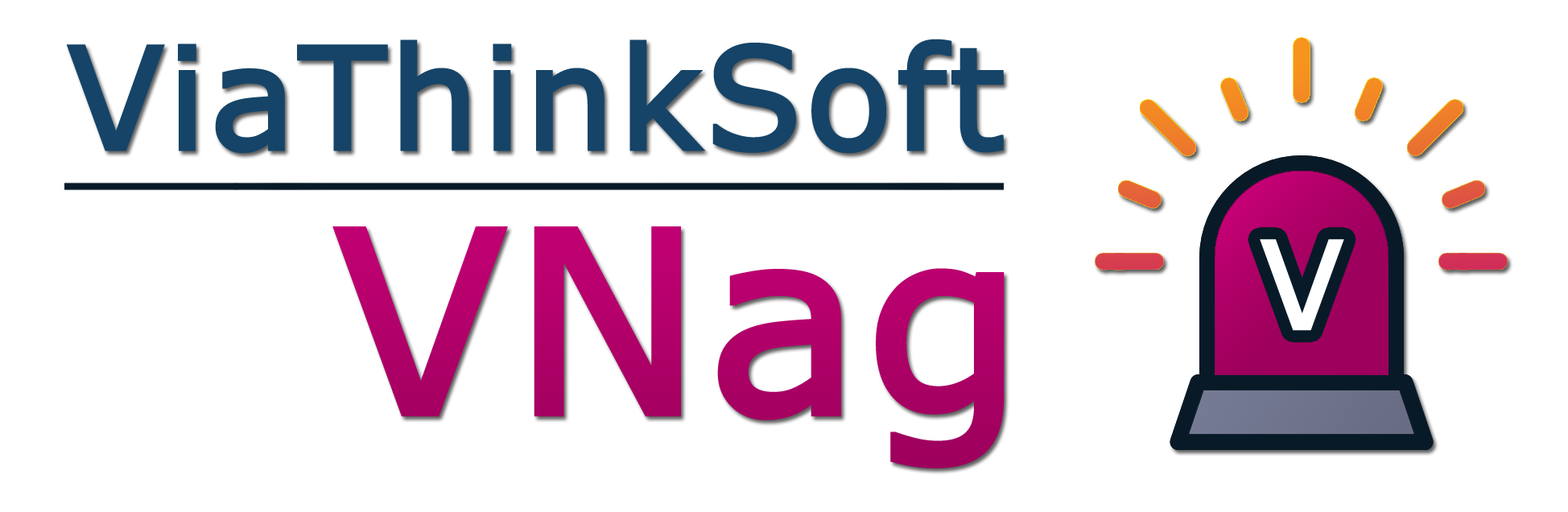
<style>
.page{position:relative;width:1568px;height:512px;background:#ffffff}
.page>*{position:absolute;margin:0}
.t1{font:141.1px "Verdana";color:#154468;font-weight:bold}
.t2{font:251.8px "Verdana";color:#b10069;font-weight:bold}
.t3{font:120.7px "Verdana";color:#ffffff;font-weight:bold}
</style>
<div class="page">
<p class="t1" style="left:66px;top:39px;width:938px;height:115px">ViaThinkSoft</p>
<p class="t2" style="left:332px;top:226px;width:673px;height:242px">VNag</p>
<p class="t3" style="left:1260px;top:239px;width:84px;height:92px">V</p>
</div>
